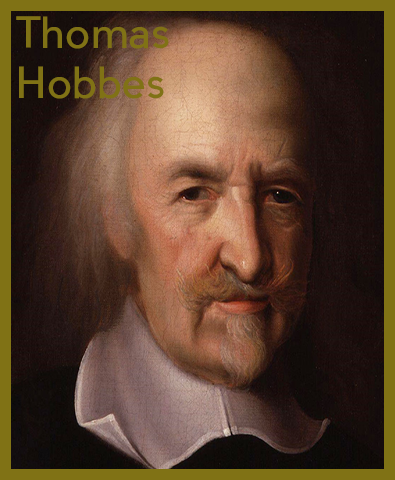
<style>
.page{position:relative;width:395px;height:480px}
.page>*{position:absolute;margin:0}
.t1{font:42px "PierSans";color:#807215}
</style>
<div class="page">
<p class="t1" style="left:16px;top:16px;width:153px;height:83px">Thomas<br>Hobbes</p>
</div>
